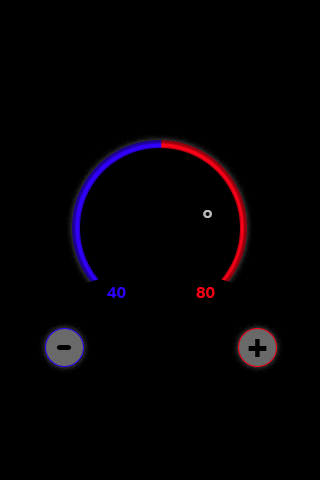
<style>
.page{position:relative;width:320px;height:480px;background:#000000}
.page>*{position:absolute;margin:0}
.t1{font:16px "ArialRoundedMTBold";color:#bebebe}
.t2{font:16px "ArialRoundedMTBold";color:#3100fb}
.t3{font:16px "ArialRoundedMTBold";color:#f80016}
.t4{font:36px "ArialRoundedMTBold";color:#000000}
.t5{font:48px "ArialRoundedMTBold";color:#000000}
</style>
<div class="page">
<p class="t1" style="left:203px;top:210px;width:9px;height:8px">o</p>
<p class="t2" style="left:107px;top:287px;width:19px;height:11px">40</p>
<p class="t3" style="left:196px;top:287px;width:19px;height:11px">80</p>
<p class="t4" style="left:248px;top:339px;width:19px;height:18px">+</p>
<p class="t5" style="left:56px;top:345px;width:16px;height:5px">-</p>
</div>
